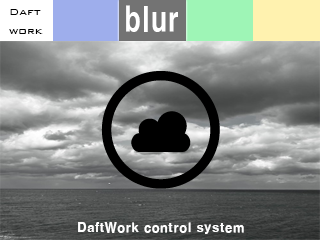
<style>
.page{position:relative;width:320px;height:240px}
.page>*{position:absolute;margin:0}
.t1{font:33.8px "H2gtrE";color:#ffffff;scale:0.75 1}
.t2{font:11.2px "BankGothicBT-Light";color:#000000;scale:1.12 1}
.t3{font:12.5px "H2gtrE";color:#ffffff}
</style>
<div class="page">
<p class="t1" style="left:126px;top:5px;width:52px;height:27px">blur</p>
<p class="t2" style="left:9px;top:9px;width:34px;height:25px">Daft<br>work</p>
<p class="t3" style="left:78px;top:222px;width:166px;height:12px">DaftWork control system</p>
</div>
